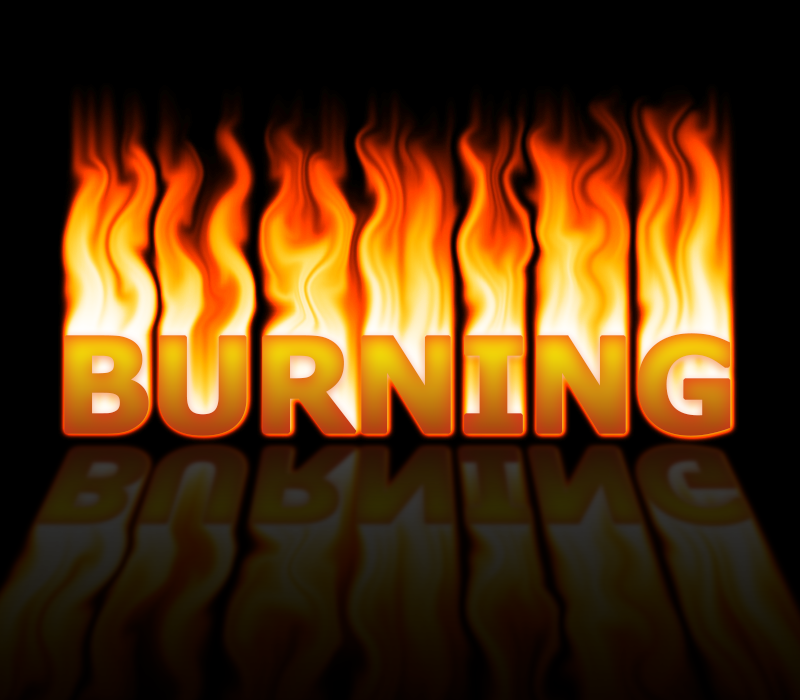
<style>
.page{position:relative;width:800px;height:700px;background:#000000}
.page>*{position:absolute;margin:0}
.t1{font:130px "Verdana-Bold";letter-spacing:-0.05em;font-weight:bold}
</style>
<div class="page">
<p class="t1" style="left:64px;top:333px;width:667px;height:103px">BURNING</p>
</div>
